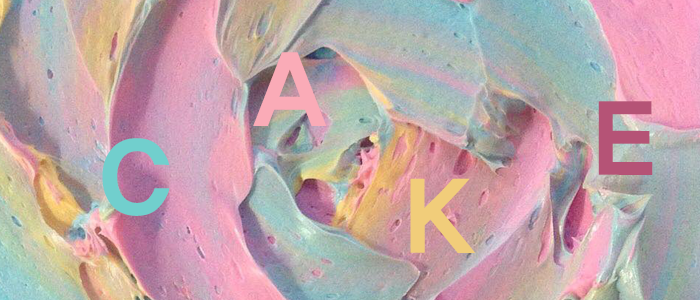
<style>
.page{position:relative;width:700px;height:300px}
.page>*{position:absolute;margin:0}
.t1{font:100px "YDIYGO360";color:#faabb7}
.t2{font:100px "YDIYGO360";color:#b55376}
.t3{font:100px "YDIYGO360";color:#71cfcd}
.t4{font:100px "YDIYGO360";color:#f1cd79}
</style>
<div class="page">
<p class="t1" style="left:253px;top:52px;width:74px;height:74px">A</p>
<p class="t2" style="left:598px;top:101px;width:55px;height:74px">E</p>
<p class="t3" style="left:102px;top:138px;width:68px;height:78px">C</p>
<p class="t4" style="left:410px;top:178px;width:66px;height:75px">K</p>
</div>
